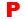
<style>
.page{position:relative;width:25px;height:19px;background:#ffffff}
.page>*{position:absolute;margin:0}
.t1{font:21.3px "Arial-Black";color:#ff0000}
</style>
<div class="page">
<p class="t1" style="left:7px;top:2px;width:13px;height:15px">P</p>
</div>
